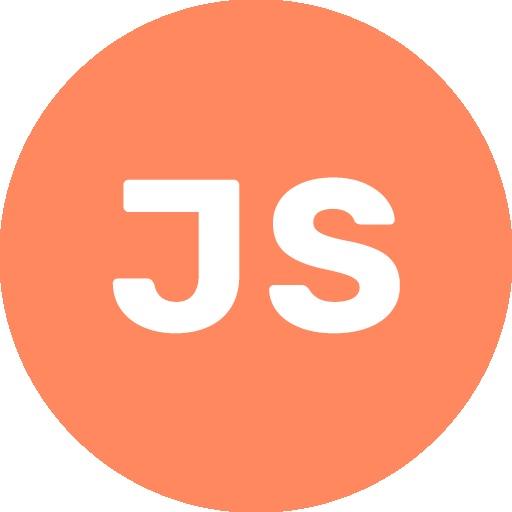
<style>
.page{position:relative;width:512px;height:512px;background:#ff885e}
.page>*{position:absolute;margin:0}
.t1{font:216px "Rubik-Bold";letter-spacing:0.05em;color:#ffffff}
</style>
<div class="page">
<p class="t1" style="left:112px;top:177px;width:288px;height:157px">JS</p>
</div>
